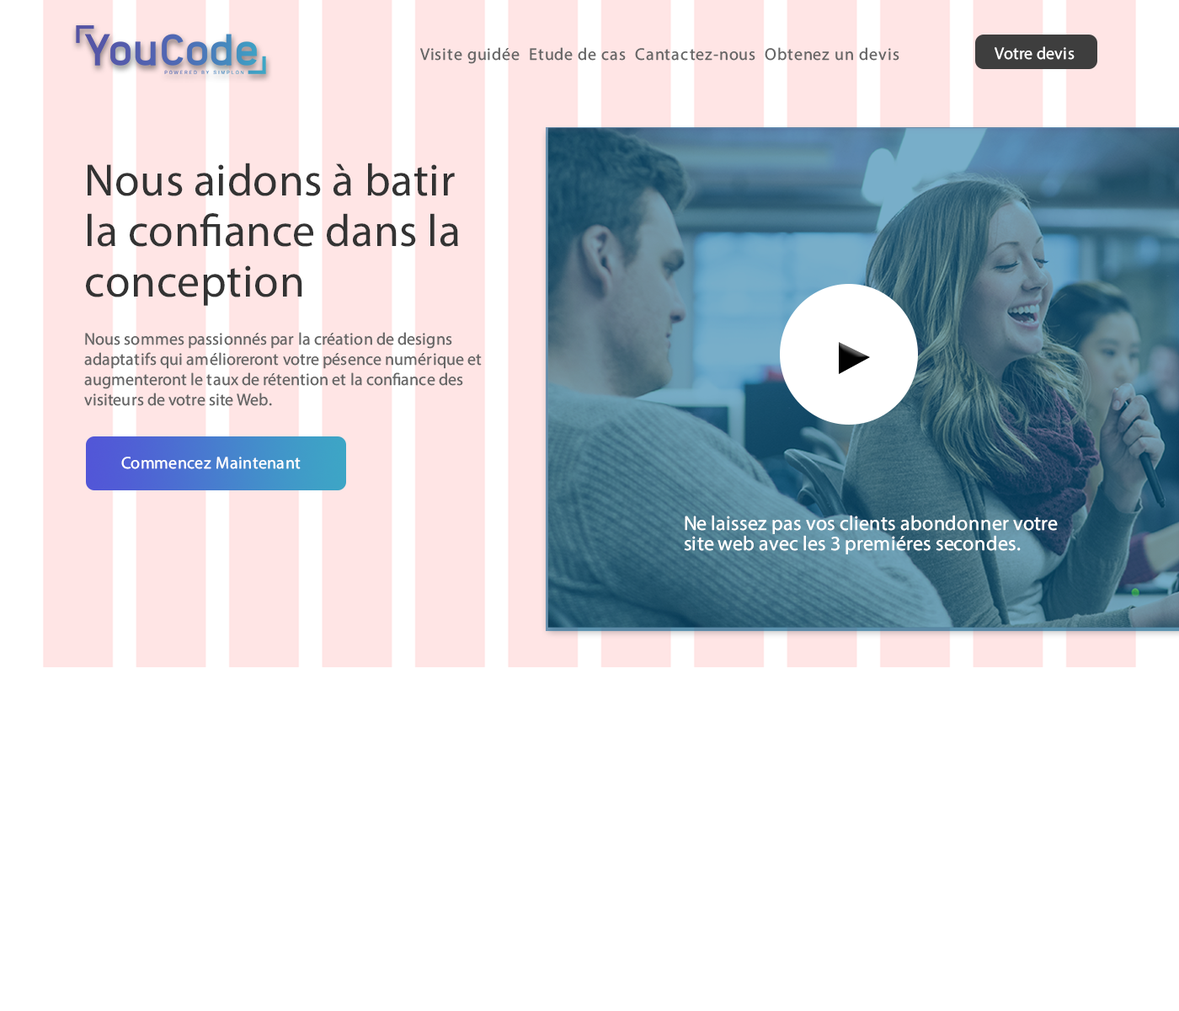
<style>
.page{position:relative;width:1179px;height:1011px;background:#ffffff}
.page>*{position:absolute;margin:0}
.t1{font:16.8px "MyriadConceptRoman-Regular";letter-spacing:0.05em;color:#666666}
.t2{font:16.8px "MyriadConceptRoman-Regular";letter-spacing:0.01em;color:#ffffff}
.t3{font:45.5px/50.5px "MyriadConceptRoman-Regular";letter-spacing:0.01em;color:#333333}
.t4{font:16.8px/20.2px "MyriadConceptRoman-Regular";letter-spacing:0.005em;color:#666666}
.t5{font:16.8px "MyriadConceptRoman-Regular";letter-spacing:0.025em;color:#ffffff}
.t6{font:20.2px/20.2px "MyriadConceptRoman-Regular";letter-spacing:0.01em;color:#ffffff}
</style>
<div class="page">
<p class="t1" style="left:420px;top:47px;width:480px;height:17px">Visite guidée  Etude de cas  Cantactez-nous  Obtenez un devis</p>
<p class="t2" style="left:995px;top:46px;width:80px;height:14px">Votre devis</p>
<p class="t3" style="left:86px;top:163px;width:372px;height:143px">Nous aidons à batir <br>la confiance dans la <br>conception</p>
<p class="t4" style="left:84px;top:332px;width:398px;height:74px">Nous sommes passionnés par la création de designs <br>adaptatifs qui amélioreront votre pésence numérique et<br>augmenteront le taux de rétention et la confiance des <br>visiteurs de votre site Web.</p>
<p class="t5" style="left:121px;top:457px;width:180px;height:12px">Commencez Maintenant</p>
<p class="t6" style="left:684px;top:515px;width:374px;height:39px">Ne laissez pas vos clients abondonner votre <br>site web avec les 3 premiéres secondes.</p>
</div>
